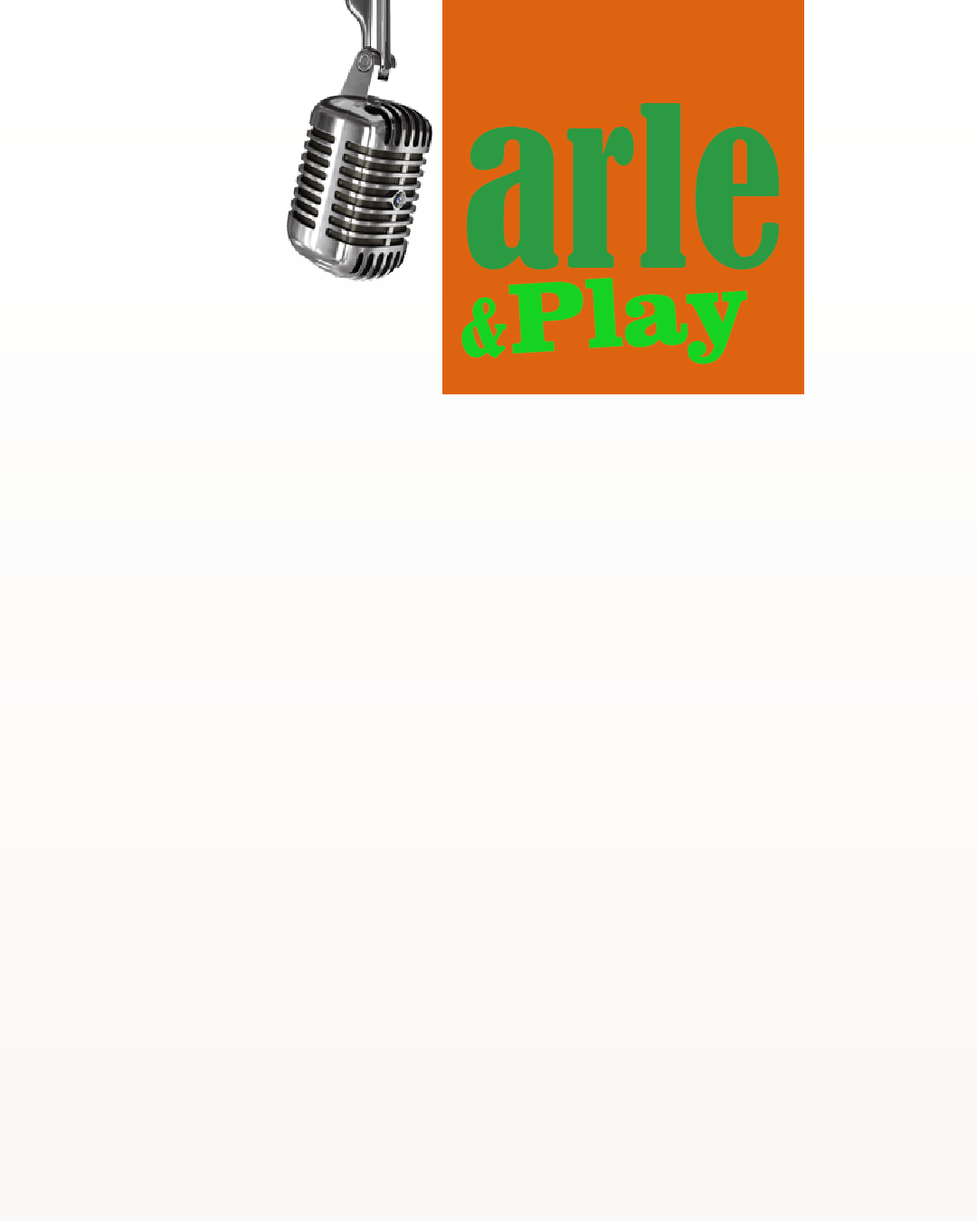
<style>
.page{position:relative;width:977px;height:1221px}
.page>*{position:absolute;margin:0}
.t1{font:208.8px "BernardMT-Condensed";color:#2c9a42}
.t2{font:102.7px "ClarendonBT-Black";color:#16d223}
.t3{font:74.5px "BernardMT-Condensed";color:#16d223}
</style>
<div class="page">
<p class="t1" style="left:467px;top:103px;width:313px;height:166px">arle</p>
<p class="t2" style="left:508px;top:278px;width:239px;height:86px;rotate:-3deg">Play</p>
<p class="t3" style="left:461px;top:297px;width:45px;height:61px;rotate:1deg">&amp;</p>
</div>
